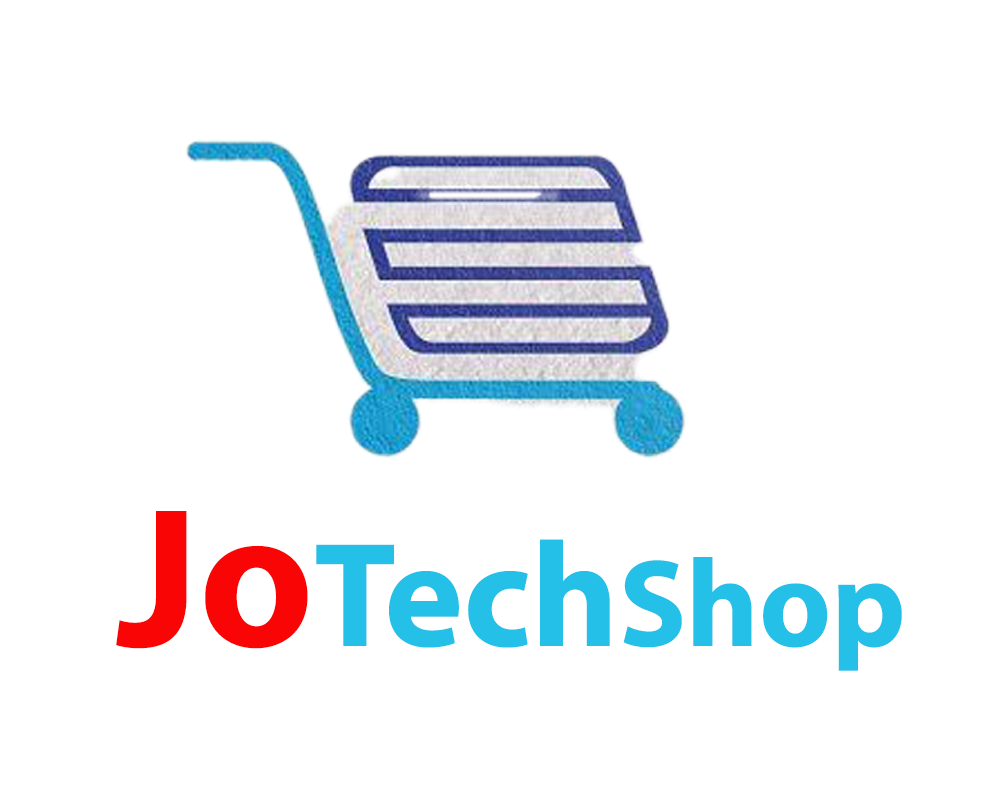
<style>
.page{position:relative;width:1000px;height:800px;background:#ffffff}
.page>*{position:absolute;margin:0}
.t1{font:150px "MyriadPro-Bold";color:#24c0e7}
.t2{font:200px "MyriadPro-Bold";color:#f90505}
.t3{font:125px "MyriadPro-Bold";color:#24c0e7}
</style>
<div class="page">
<p class="t1" style="left:116px;top:511px;width:786px;height:160px"><span class="t2">Jo</span>Tech<span class="t3">Shop</span></p>
</div>
